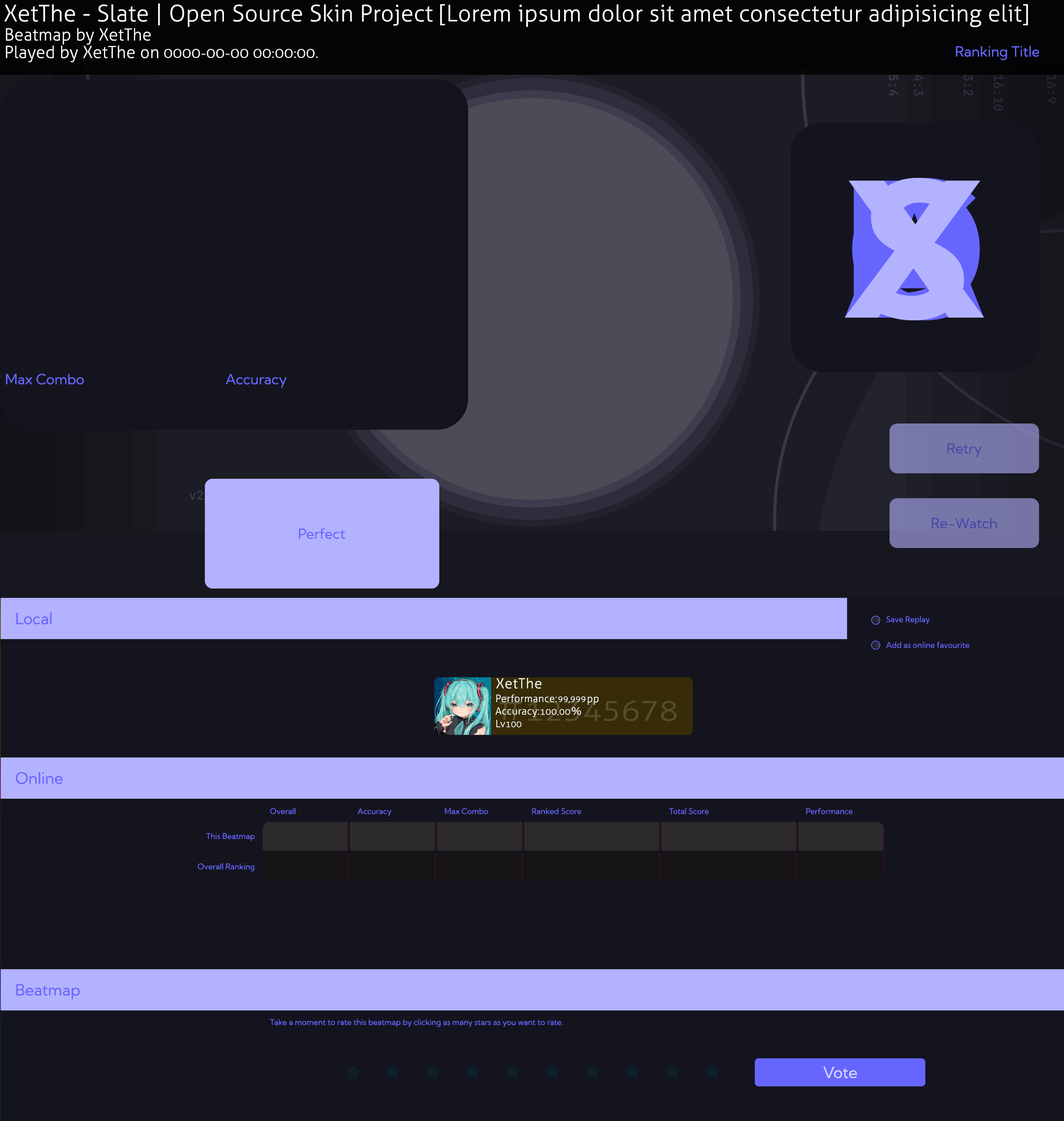
<style>
.page{position:relative;width:1064px;height:1121px;background:#14141f}
.page>*{position:absolute;margin:0}
.t1{font:14px "KumbhSans-Regular";color:#6666ff}
.t2{font:186.9px "KumbhSans-Bold";color:#b3b2ff}
.t3{font:14px "KumbhSans-Regular";color:#4848a8}
.t4{font:15.6px "KumbhSans-Regular";color:#6666ff}
.t5{font:7.8px "KumbhSans-Regular";color:#6666ff}
.t6{font:15.6px "KumbhSans-Regular";color:#d9d9ff}
</style>
<div class="page">
<p class="t1" style="left:955px;top:46px;width:84px;height:14px">Ranking Title</p>
<p class="t2" style="left:844px;top:181px;width:139px;height:137px">A</p>
<p class="t2" style="left:844px;top:181px;width:140px;height:137px">X</p>
<p class="t2" style="left:844px;top:181px;width:140px;height:137px">X</p>
<p class="t2" style="left:862px;top:178px;width:102px;height:142px">S</p>
<p class="t2" style="left:862px;top:178px;width:102px;height:142px">S</p>
<p class="t1" style="left:6px;top:374px;width:78px;height:11px">Max Combo</p>
<p class="t1" style="left:225px;top:374px;width:62px;height:14px">Accuracy</p>
<p class="t3" style="left:947px;top:443px;width:34px;height:14px">Retry</p>
<p class="t3" style="left:931px;top:518px;width:66px;height:11px">Re-Watch</p>
<p class="t1" style="left:299px;top:528px;width:46px;height:11px">Perfect</p>
<p class="t4" style="left:16px;top:612px;width:36px;height:13px">Local</p>
<p class="t5" style="left:886px;top:616px;width:44px;height:8px">Save Replay</p>
<p class="t5" style="left:886px;top:642px;width:83px;height:6px">Add as online favourite</p>
<p class="t4" style="left:16px;top:772px;width:47px;height:12px">Online</p>
<p class="t5" style="left:270px;top:808px;width:25px;height:6px">Overall</p>
<p class="t5" style="left:357px;top:808px;width:34px;height:8px">Accuracy</p>
<p class="t5" style="left:445px;top:808px;width:43px;height:6px">Max Combo</p>
<p class="t5" style="left:532px;top:808px;width:49px;height:6px">Ranked Score</p>
<p class="t5" style="left:669px;top:808px;width:40px;height:6px">Total Score</p>
<p class="t5" style="left:806px;top:808px;width:47px;height:6px">Performance</p>
<p class="t5" style="left:206px;top:833px;width:49px;height:8px">This Beatmap</p>
<p class="t5" style="left:197px;top:863px;width:57px;height:9px">Overall Ranking</p>
<p class="t4" style="left:16px;top:984px;width:64px;height:16px">Beatmap</p>
<p class="t5" style="left:270px;top:1019px;width:293px;height:8px">Take a moment to rate this beatmap by clicking as many stars as you want to rate.</p>
<p class="t6" style="left:823px;top:1067px;width:34px;height:12px">Vote</p>
</div>
